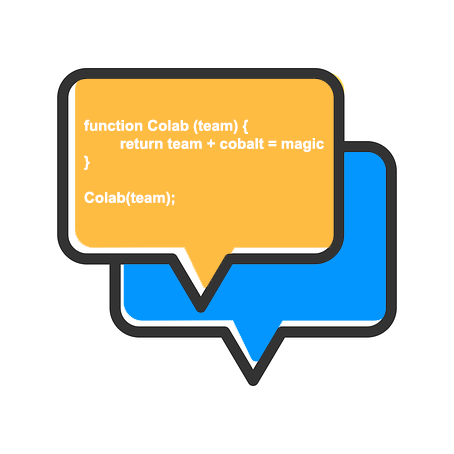
<style>
.page{position:relative;width:454px;height:454px;background:#ffffff}
.page>*{position:absolute;margin:0}
.t1{font:15px/18px "Arial-BoldMT";color:#ffffff}
</style>
<div class="page">
<p class="t1" style="left:84px;top:119px;width:240px;height:87px">function Colab (team) {<br> return team + cobalt = magic<br>}<br><br>Colab(team);</p>
</div>
